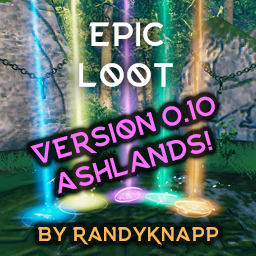
<style>
.page{position:relative;width:256px;height:256px}
.page>*{position:absolute;margin:0}
.t1{font:34px/40.8px "Njord-Alternate";color:#ffffff}
.t2{font:28px/33.6px "Njord-Alternate";color:#ff72ff}
.t3{font:20px "Njord-Alternate";color:#ffb75b}
</style>
<div class="page">
<p class="t1" style="left:79px;top:22px;width:94px;height:65px;text-align:center">Epic<br>Loot</p>
<p class="t2" style="left:30px;top:96px;width:185px;height:98px;text-align:center;rotate:-16deg">Version 0.10<br>ASHLANDS!</p>
<p class="t3" style="left:38px;top:227px;width:180px;height:18px">by RandyKnapp</p>
</div>
